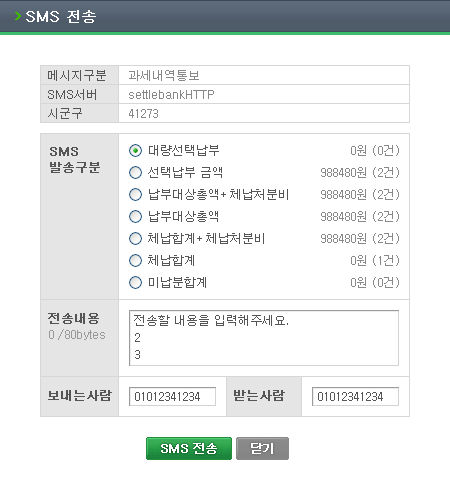
<style>
.page{position:relative;width:450px;height:495px;background:#ffffff}
.page>*{position:absolute;margin:0}
.t1{font:14px "Dotum";color:#ffffff;font-weight:bold}
.t2{font:12px/19px "Dotum";color:#555555;text-transform:uppercase}
.t3{font:12px/19px "Dotum";color:#888888}
.t4{font:12px/19px "Dotum";color:#888888;text-transform:uppercase}
.t5{font:12px/16px "Dotum";color:#555555;text-transform:uppercase;font-weight:bold}
.t6{font:12px/22px "Dotum";color:#555555;text-transform:uppercase}
.t7{font:12px/22px "Dotum";color:#888888;text-transform:uppercase}
.t8{font:12px/16px "Dotum";color:#999999}
.t9{font:12px/16px "Dotum";color:#555555;font-weight:bold}
.t10{font:12px/17px "Dotum";color:#555555}
.t11{font:12px "Dotum";color:#555555;font-weight:bold}
.t12{font:12px "Dotum";color:#555555}
.t13{font:12px "Dotum";letter-spacing:-0.05em;color:#ffffff;font-weight:bold}
</style>
<div class="page">
<p class="t1" style="left:26px;top:10px;width:70px;height:13px">SMS 전송</p>
<p class="t2" style="left:48px;top:70px;width:58px;height:49px">메시지구분<br>SMS서버<br>시군구</p>
<p class="t3" style="left:129px;top:70px;width:85px;height:48px"><span class="t4">과세내역통보<br></span>settlebankHTTP<br>41273</p>
<p class="t5" style="left:50px;top:147px;width:50px;height:26px">SMS<br>발송구분</p>
<p class="t6" style="left:148px;top:145px;width:140px;height:143px">대량선택납부<br>선택납부 금액<br>납부대상총액+ 체납처분비<br>납부대상총액<br>체납합계+ 체납처분비<br>체납합계<br>미납분합계</p>
<p class="t7" style="left:321px;top:145px;width:78px;height:143px;text-align:right">0원 (0건)<br>988480원 (2건)<br>988480원 (2건)<br>988480원 (2건)<br>988480원 (2건)<br>0원 (1건)<br>0원 (0건)</p>
<p class="t8" style="left:48px;top:313px;width:57px;height:27px"><span class="t9">전송내용<br></span>0 /80bytes</p>
<p class="t10" style="left:134px;top:315px;width:154px;height:44px">전송할 내용을 입력해주세요.<br>2<br>3</p>
<p class="t11" style="left:48px;top:390px;width:64px;height:11px">보내는사람</p>
<p class="t11" style="left:234px;top:390px;width:51px;height:11px">받는사람</p>
<p class="t12" style="left:135px;top:392px;width:65px;height:9px">01012341234</p>
<p class="t12" style="left:318px;top:392px;width:65px;height:9px">01012341234</p>
<p class="t13" style="left:161px;top:443px;width:56px;height:11px">SMS 전송</p>
<p class="t13" style="left:251px;top:443px;width:22px;height:11px">닫기</p>
</div>
